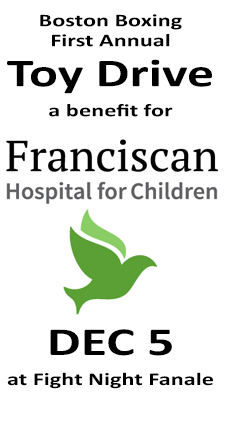
<style>
.page{position:relative;width:225px;height:425px;background:#ffffff}
.page>*{position:absolute;margin:0}
.t1{font:18px/20px "Calibri-Bold";color:#000000;scale:1.35 1}
.t2{font:40px/40px "Calibri-Bold";color:#000000;scale:1.35 1}
.t3{font:18px/30px "Calibri-Bold";color:#000000;scale:1.35 1}
</style>
<div class="page">
<p class="t1" style="left:7px;top:14px;width:205px;height:103px;text-align:center">Boston Boxing<br>First Annual<br><span class="t2">Toy Drive<br></span><span class="t3">a benefit for</span></p>
<p class="t3" style="left:7px;top:329px;width:206px;height:60px;text-align:center"><span class="t2">DEC 5<br></span>at Fight Night Fanale</p>
</div>
